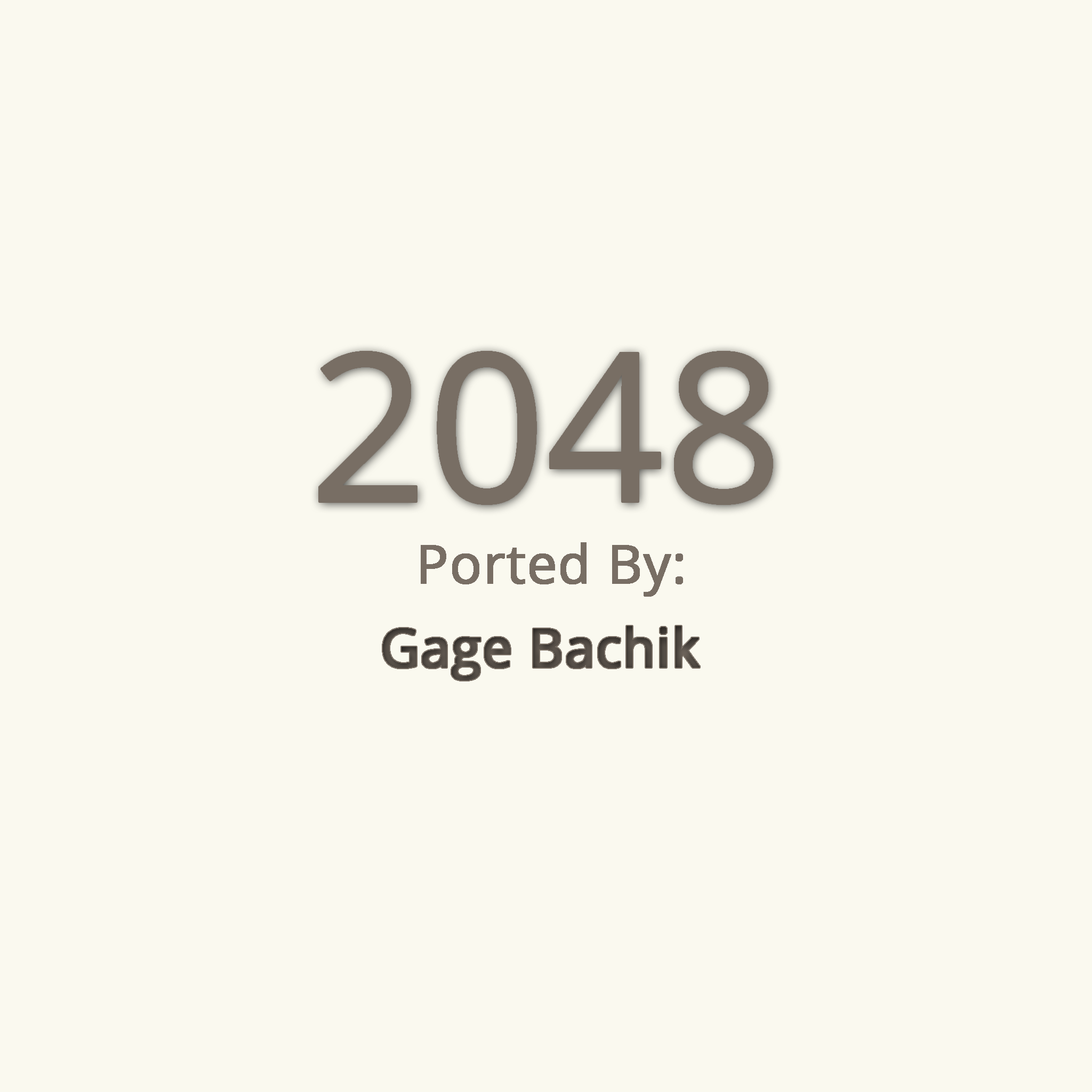
<style>
.page{position:relative;width:1092px;height:1092px;background:#faf9ef}
.page>*{position:absolute;margin:0}
.t1{font:206.9px "OpenSans";color:#786e64}
.t2{font:53.3px "OpenSans";color:#786e64;font-weight:bold}
.t3{font:53.3px "OpenSans";color:#4d4740;font-weight:bold}
</style>
<div class="page">
<p class="t1" style="left:319px;top:352px;width:453px;height:152px">2048</p>
<p class="t2" style="left:421px;top:542px;width:262px;height:55px">Ported By:</p>
<p class="t3" style="left:383px;top:626px;width:317px;height:54px">Gage Bachik</p>
</div>
